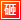
<style>
.page{position:relative;width:21px;height:20px;background:#ffffff}
.page>*{position:absolute;margin:0}
.t1{font:12px "MicrosoftYaHei";letter-spacing:0.08em;color:#ffffff}
</style>
<div class="page">
<p class="t1" style="left:4px;top:4px;width:12px;height:11px">砸</p>
</div>
